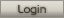
<style>
.page{position:relative;width:64px;height:18px}
.page>*{position:absolute;margin:0}
.t1{font:12px "HandelGotD-Ligh";color:#3d3a31}
</style>
<div class="page">
<p class="t1" style="left:18px;top:5px;width:28px;height:10px">Login</p>
</div>
